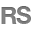
<style>
.page{position:relative;width:32px;height:32px;background:#ffffff}
.page>*{position:absolute;margin:0}
.t1{font:24px "HelveticaNeue-Bold";letter-spacing:0.025em;color:#838383}
</style>
<div class="page">
<p class="t1" style="left:1px;top:6px;width:30px;height:18px">RS</p>
</div>
